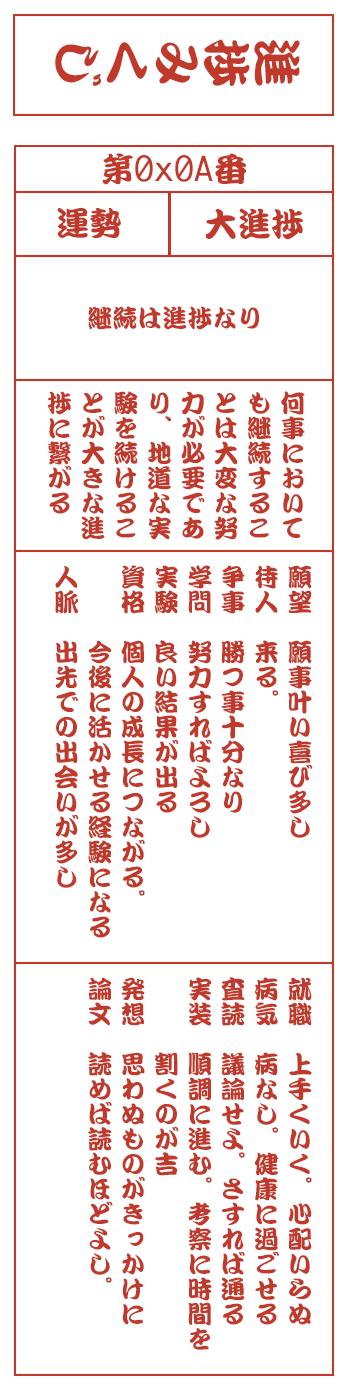
<style>
.page{position:relative;width:350px;height:1400px;background:#ffffff}
.page>*{position:absolute;margin:0}
.t1{font:50px "DFKanTeiRyu-XB-MP-RKSJ-H";color:#c0392b}
.t2{font:33.3px "Monaco";color:#c0392b}
.t3{font:33.3px "DFKanTeiRyu-XB-MP-RKSJ-H";color:#c0392b}
.t4{font:25px "DFKanTeiRyu-XB-MP-RKSJ-H";color:#c0392b}
.t5{font:25px/33.3px "DFKanTeiRyu-XB-MP-RKSJ-H";color:#c0392b}
</style>
<div class="page">
<p class="t1" style="left:55px;top:39px;width:245px;height:47px;rotate:90deg">進捗みくじ</p>
<p class="t2" style="left:102px;top:153px;width:144px;height:32px"><span class="t3">第</span>0x0A<span class="t3">番</span></p>
<p class="t3" style="left:57px;top:207px;width:64px;height:31px">運勢</p>
<p class="t3" style="left:205px;top:208px;width:98px;height:32px">大進捗</p>
<p class="t4" style="left:88px;top:306px;width:171px;height:24px">継続は進捗なり</p>
<p class="t5" style="left:47px;top:391px;width:258px;height:149px">何事において<br>も継続するこ<br>とは大変な努<br>力が必要であ<br>り、地道な実<br>験を続けるこ<br>とが大きな進<br>捗に繋がる</p>
<p class="t5" style="left:54px;top:565px;width:259px;height:373px">願望　願事叶い喜び多し<br>待人　来る。<br>争事　勝つ事十分なり<br>学問　努力すればよろし<br>実験　良い結果が出る<br>資格　個人の成長につながる。<br>　　　今後に活かせる経験になる<br>人脈　出先での出会いが多し</p>
<p class="t5" style="left:88px;top:977px;width:224px;height:373px">就職　上手くいく。心配いらぬ<br>病気　病なし。健康に過ごせる<br>査読　議論せよ。さすれば通る<br>実装　順調に進む。考察に時間を<br>　　　割くのが吉<br>発想　思わぬものがきっかけに<br>論文　読めば読むほどよし。</p>
</div>
